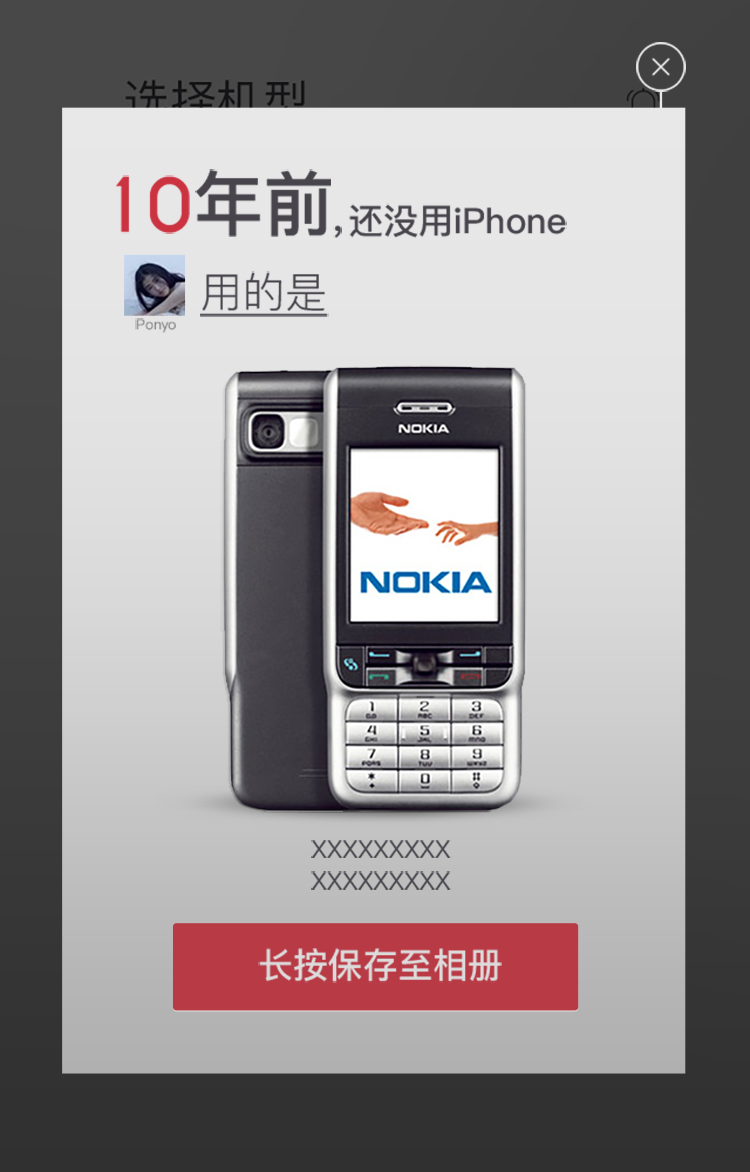
<style>
.page{position:relative;width:750px;height:1172px}
.page>*{position:absolute;margin:0}
.t1{font:70.3px "PingFang-SC-Bold";color:#47444c}
.t2{font:70.3px "CaviarDreams-Bold";color:#cc3341}
.t3{font:35.2px "PingFang-SC-Bold";color:#47444c}
.t4{font:35.6px "PingFang-SC-Bold";color:#47444c}
.t5{font:42.2px "PingFang-SC-Regular";color:#47444c;text-decoration:underline}
.t6{font:14.1px "PingFang-SC-Medium";color:#797979}
.t7{font:24.1px "PingFang-SC-Medium";color:#47444c}
.t8{font:35px "PingFang-SC-Bold";color:#dcdcdc}
</style>
<div class="page">
<p class="t1" style="left:195px;top:169px;width:136px;height:68px">年前</p>
<p class="t2" style="left:116px;top:175px;width:74px;height:59px">10</p>
<p class="t3" style="left:349px;top:203px;width:218px;height:35px">还没用iPhone</p>
<p class="t4" style="left:333px;top:225px;width:9px;height:13px">，</p>
<p class="t5" style="left:200px;top:271px;width:129px;height:46px">用的是</p>
<p class="t6" style="left:135px;top:318px;width:41px;height:15px">Ponyo</p>
<p class="t7" style="left:311px;top:840px;width:141px;height:18px">XXXXXXXXX</p>
<p class="t7" style="left:311px;top:871px;width:141px;height:19px">XXXXXXXXX</p>
<p class="t8" style="left:258px;top:948px;width:244px;height:35px">长按保存至相册</p>
</div>
